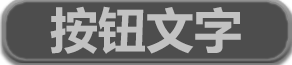
<style>
.page{position:relative;width:292px;height:65px;background:#4d4d4d}
.page>*{position:absolute;margin:0}
.t1{font:48px "MicrosoftYaHei-Bold";color:#c2c2c2}
</style>
<div class="page">
<p class="t1" style="left:50px;top:6px;width:191px;height:48px">按钮文字</p>
</div>
